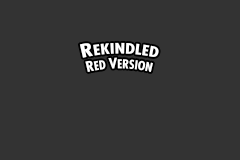
<style>
.page{position:relative;width:240px;height:160px;background:#333333}
.page>*{position:absolute;margin:0}
.t1{font:14px "FuturaLT-ExtraBold";color:#ffffff}
.t2{font:18px "FuturaLT-ExtraBold";color:#ffffff}
.t3{font:12px "FuturaLT-ExtraBold";color:#ffffff}
</style>
<div class="page">
<p class="t1" style="left:79px;top:42px;width:80px;height:16px"><span class="t2">R</span>EKINDLED</p>
<p class="t3" style="left:85px;top:57px;width:68px;height:15px"><span class="t1">R</span>ED <span class="t1">V</span>ERSION</p>
</div>
